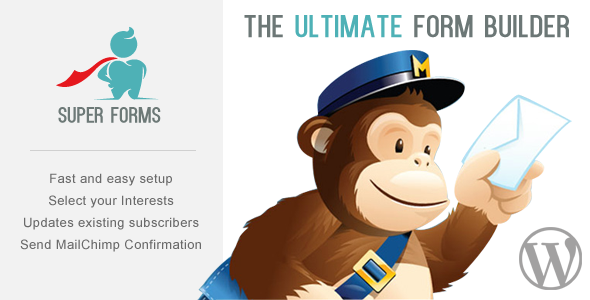
<style>
.page{position:relative;width:590px;height:300px;background:#f2f2f2}
.page>*{position:absolute;margin:0}
.t1{font:31.7px "Kenzo";letter-spacing:0.025em;color:#6c7776}
.t2{font:31.7px "Kenzo";letter-spacing:0.025em;color:#4eb1b6}
.t3{font:13.1px/22px "ArialMT";letter-spacing:0.025em;color:#6a6a6a}
</style>
<div class="page">
<p class="t1" style="left:244px;top:15px;width:325px;height:23px">The <span class="t2">ultimate</span> form builder</p>
<p class="t3" style="left:20px;top:173px;width:181px;height:79px;text-align:center">Fast and easy setup<br>Select your Interests<br>Updates existing subscribers<br>Send MailChimp Confirmation</p>
</div>
